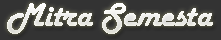
<style>
.page{position:relative;width:221px;height:40px;background:#333333}
.page>*{position:absolute;margin:0}
.t1{font:35px "HarlowSolid";letter-spacing:-0.015em;color:#ffffff}
</style>
<div class="page">
<p class="t1" style="left:7px;top:3px;width:206px;height:31px">Mitra Semesta</p>
</div>
